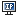
<style>
.page{position:relative;width:18px;height:18px;background:#ffffff}
.page>*{position:absolute;margin:0}
.t1{font:7px "Terminal";color:#ffffff}
</style>
<div class="page">
<p class="t1" style="left:6px;top:4px;width:7px;height:5px">IP</p>
</div>
